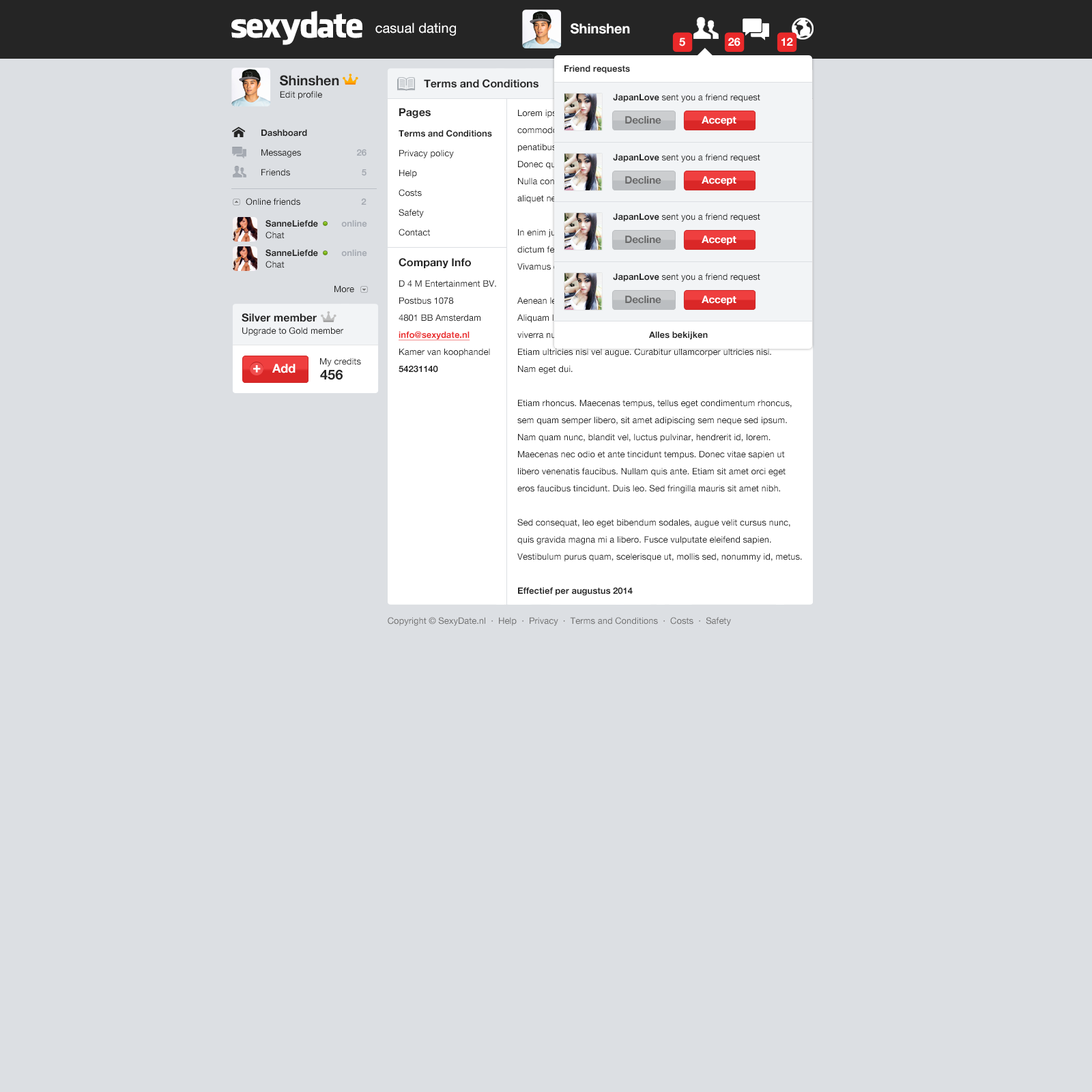
<style>
.page{position:relative;width:1092px;height:1092px;background:#dcdfe3}
.page>*{position:absolute;margin:0}
.t1{font:34.1px "FacebookLetterFaces";letter-spacing:-0.05em;color:#ffffff}
.t2{font:13.6px "HelveticaNeue";color:#ffffff}
.t3{font:13.6px "HelveticaNeue-Bold";color:#ffffff}
.t4{font:10.9px "HelveticaNeue-Bold";color:#ffffff}
.t5{font:8.9px "HelveticaNeue-Bold";color:#252525}
.t6{font:13.6px "HelveticaNeue-Bold";color:#252525}
.t7{font:10.9px "HelveticaNeue-Bold";color:#252525}
.t8{font:8.9px "HelveticaNeue";color:#252525}
.t9{font:8.9px/19.7px "HelveticaNeue";color:#252525}
.t10{font:10.9px/17.1px "HelveticaNeue-Bold";color:#252525}
.t11{font:8.9px/20.5px "HelveticaNeue-Bold";color:#252525}
.t12{font:8.9px/20.5px "HelveticaNeue";color:#252525}
.t13{font:8.9px/17.1px "HelveticaNeue";color:#252525}
.t14{font:8.9px/17.1px "HelveticaNeue-Bold";color:#ea292a;text-decoration:underline}
.t15{font:8.9px/17.1px "HelveticaNeue-Bold";color:#252525}
.t16{font:8.9px/17.1px "HelveticaNeue"}
.t17{font:8.9px/17.1px "HelveticaNeue-Bold"}
.t18{font:10.2px "HelveticaNeue-Bold";color:#686868}
.t19{font:10.2px "HelveticaNeue-Bold";color:#ffffff}
.t20{font:8.9px/19.7px "HelveticaNeue-Bold";color:#252525}
.t21{font:8.9px/19.7px "HelveticaNeue-Bold";color:#a5aab2}
.t22{font:8.9px "HelveticaNeue-Bold";color:#a5aab2}
.t23{font:8.9px/11.6px "HelveticaNeue-Bold";color:#252525}
.t24{font:8.9px/11.6px "HelveticaNeue-Bold";color:#a5aab2}
.t25{font:8.9px/11.6px "HelveticaNeue";color:#252525}
.t26{font:13px "HelveticaNeue-Bold";color:#ffffff;font-weight:bold}
.t27{font:12.3px "HelveticaNeue-Bold";color:#ffffff}
.t28{font:8.9px "HelveticaNeue";color:#707070}
</style>
<div class="page">
<p class="t1" style="left:231px;top:11px;width:131px;height:34px">sexydate</p>
<p class="t2" style="left:375px;top:23px;width:81px;height:13px">casual dating</p>
<p class="t3" style="left:571px;top:23px;width:59px;height:11px">Shinshen</p>
<p class="t4" style="left:679px;top:38px;width:6px;height:8px">5</p>
<p class="t4" style="left:728px;top:38px;width:13px;height:8px">26</p>
<p class="t4" style="left:781px;top:38px;width:12px;height:8px">12</p>
<p class="t5" style="left:564px;top:65px;width:66px;height:9px">Friend requests</p>
<p class="t6" style="left:280px;top:75px;width:59px;height:11px">Shinshen</p>
<p class="t7" style="left:424px;top:79px;width:114px;height:9px">Terms and Conditions</p>
<p class="t8" style="left:280px;top:91px;width:42px;height:9px">Edit profile</p>
<p class="t8" style="left:613px;top:94px;width:147px;height:8px"><span class="t5"><br>                    JapanLove</span> sent you a friend request</p>
<p class="t9" style="left:399px;top:108px;width:97px;height:265px"><span class="t10">Pages<br></span><span class="t11">Terms and Conditions<br></span>Privacy policy<br>Help<br>Costs<br>Safety<br>Contact<br><br><span class="t10">Company Info<br></span><span class="t12">D 4 M Entertainment BV.<br></span><span class="t13">Postbus 1078<br>4801 BB Amsterdam<br></span><span class="t14">info@sexydate.nl<br></span><span class="t13">Kamer van koophandel<br></span><span class="t15">54231140</span></p>
<p class="t16" style="left:517px;top:109px;width:285px;height:487px">Lorem ipsum dolor sit amet, consectetuer adipiscing elit. Aenean <br>commodo ligula eget dolor. Aenean massa. Cum sociis natoque <br>penatibus et magnis dis parturient montes, nascetur ridiculus mus. <br>Donec quam felis, ultricies nec, pellentesque eu, pretium quis, sem. <br>Nulla consequat massa quis enim. Donec pede justo, fringilla vel, <br>aliquet nec, vulputate eget, arcu. <br><br>In enim justo, rhoncus ut, imperdiet a, venenatis vitae, justo. Nullam <br>dictum felis eu pede mollis pretium. Integer tincidunt. Cras dapibus. <br>Vivamus elementum semper nisi. Aenean vulputate eleifend tellus. <br><br>Aenean leo ligula, porttitor eu, consequat vitae, eleifend ac, enim. <br>Aliquam lorem ante, dapibus in, viverra quis, feugiat a, tellus. Phasellus <br>viverra nulla ut metus varius laoreet. Quisque rutrum. Aenean imperdiet. <br>Etiam ultricies nisi vel augue. Curabitur ullamcorper ultricies nisi. <br>Nam eget dui.<br><br>Etiam rhoncus. Maecenas tempus, tellus eget condimentum rhoncus, <br>sem quam semper libero, sit amet adipiscing sem neque sed ipsum. <br>Nam quam nunc, blandit vel, luctus pulvinar, hendrerit id, lorem. <br>Maecenas nec odio et ante tincidunt tempus. Donec vitae sapien ut <br>libero venenatis faucibus. Nullam quis ante. Etiam sit amet orci eget <br>eros faucibus tincidunt. Duis leo. Sed fringilla mauris sit amet nibh.<br><br>Sed consequat, leo eget bibendum sodales, augue velit cursus nunc, <br>quis gravida magna mi a libero. Fusce vulputate eleifend sapien. <br>Vestibulum purus quam, scelerisque ut, mollis sed, nonummy id, metus.<br><br><span class="t17">Effectief per augustus 2014</span></p>
<p class="t18" style="left:625px;top:116px;width:36px;height:8px">Decline</p>
<p class="t19" style="left:702px;top:116px;width:34px;height:10px">Accept</p>
<p class="t9" style="left:261px;top:129px;width:46px;height:47px"><span class="t20">Dashboard<br></span>Messages<br>Friends</p>
<p class="t21" style="left:357px;top:149px;width:9px;height:27px;text-align:right">26<br>5</p>
<p class="t8" style="left:613px;top:154px;width:147px;height:8px"><span class="t5"><br>                    JapanLove</span> sent you a friend request</p>
<p class="t18" style="left:625px;top:176px;width:36px;height:8px">Decline</p>
<p class="t19" style="left:702px;top:176px;width:34px;height:10px">Accept</p>
<p class="t8" style="left:246px;top:198px;width:120px;height:7px">Online friends      <span class="t22">2</span></p>
<p class="t23" style="left:265px;top:220px;width:102px;height:19px">SanneLiefde          <span class="t24">online<br></span><span class="t25">Chat</span></p>
<p class="t8" style="left:613px;top:213px;width:147px;height:9px"><span class="t5"><br>                    JapanLove</span> sent you a friend request</p>
<p class="t18" style="left:625px;top:235px;width:36px;height:9px">Decline</p>
<p class="t19" style="left:702px;top:235px;width:34px;height:10px">Accept</p>
<p class="t23" style="left:265px;top:249px;width:102px;height:19px">SanneLiefde          <span class="t24">online<br></span><span class="t25">Chat</span></p>
<p class="t8" style="left:613px;top:273px;width:147px;height:9px"><span class="t5"><br>                    JapanLove</span> sent you a friend request</p>
<p class="t8" style="left:334px;top:285px;width:20px;height:8px">More</p>
<p class="t18" style="left:625px;top:296px;width:36px;height:8px">Decline</p>
<p class="t19" style="left:702px;top:296px;width:34px;height:9px">Accept</p>
<p class="t7" style="left:242px;top:313px;width:75px;height:9px">Silver member</p>
<p class="t8" style="left:242px;top:327px;width:101px;height:9px">Upgrade to Gold member</p>
<p class="t5" style="left:649px;top:331px;width:59px;height:9px">Alles bekijken</p>
<p class="t26" style="left:253px;top:365px;width:8px;height:8px">+</p>
<p class="t27" style="left:272px;top:364px;width:24px;height:9px">Add</p>
<p class="t8" style="left:320px;top:358px;width:41px;height:8px">My credits</p>
<p class="t6" style="left:320px;top:369px;width:23px;height:11px">456</p>
<p class="t28" style="left:388px;top:617px;width:343px;height:9px">Copyright © SexyDate.nl  ·  Help  ·  Privacy  ·  Terms and Conditions  ·  Costs  ·  Safety</p>
</div>
